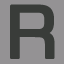
<style>
.page{position:relative;width:64px;height:64px;background:#949294}
.page>*{position:absolute;margin:0}
.t1{font:72px "Moire";color:#393c39;font-weight:bold}
</style>
<div class="page">
<p class="t1" style="left:10px;top:4px;width:45px;height:55px">R</p>
</div>
